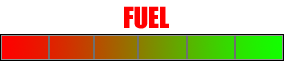
<style>
.page{position:relative;width:284px;height:61px;background:#ffffff}
.page>*{position:absolute;margin:0}
.t1{font:26.7px "Impact";color:#ff0000}
</style>
<div class="page">
<p class="t1" style="left:124px;top:6px;width:45px;height:23px">FUEL</p>
</div>
